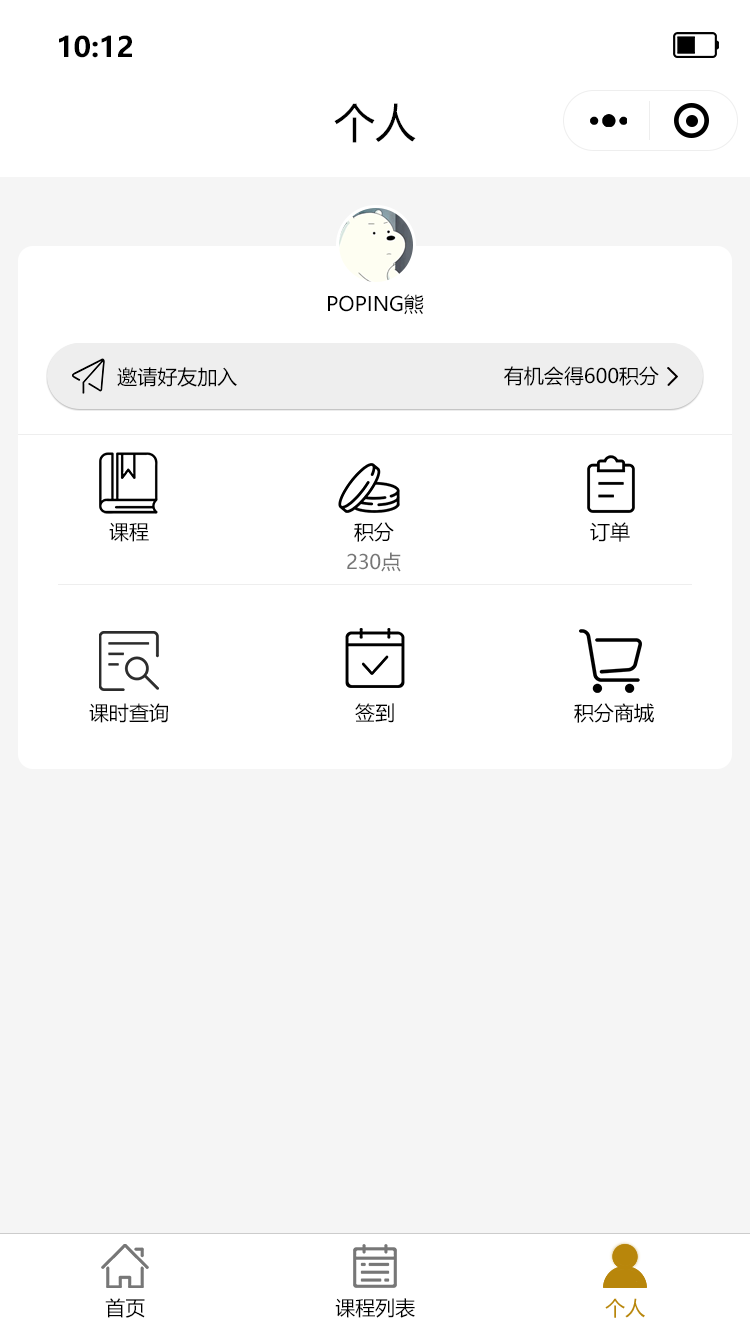
<style>
.page{position:relative;width:750px;height:1334px;background:#ffffff}
.page>*{position:absolute;margin:0}
.t1{font:28.1px "MicrosoftYaHei-Bold";color:#000000}
.t2{font:41px "MicrosoftYaHei";color:#000000}
.t3{font:20px "MicrosoftYaHei";color:#000000}
.t4{font:20px "MicrosoftYaHei";color:#777777}
.t5{font:20px "MicrosoftYaHei";color:#b8860b}
</style>
<div class="page">
<p class="t1" style="left:59px;top:35px;width:73px;height:23px">10:12</p>
<p class="t2" style="left:334px;top:103px;width:82px;height:40px">个人</p>
<p class="t3" style="left:328px;top:294px;width:96px;height:21px">POPING熊</p>
<p class="t3" style="left:504px;top:366px;width:155px;height:20px">有机会得600积分</p>
<p class="t3" style="left:117px;top:367px;width:120px;height:20px">邀请好友加入</p>
<p class="t3" style="left:109px;top:522px;width:40px;height:20px">课程</p>
<p class="t3" style="left:354px;top:522px;width:40px;height:20px">积分</p>
<p class="t3" style="left:590px;top:522px;width:40px;height:20px">订单</p>
<p class="t4" style="left:347px;top:552px;width:54px;height:20px">230点</p>
<p class="t3" style="left:89px;top:703px;width:79px;height:20px">课时查询</p>
<p class="t3" style="left:355px;top:703px;width:39px;height:20px">签到</p>
<p class="t3" style="left:574px;top:703px;width:80px;height:20px">积分商城</p>
<p class="t3" style="left:105px;top:1298px;width:40px;height:20px">首页</p>
<p class="t3" style="left:335px;top:1298px;width:80px;height:20px">课程列表</p>
<p class="t5" style="left:605px;top:1298px;width:40px;height:20px">个人</p>
</div>
